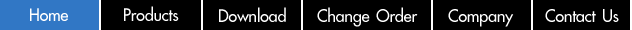
<style>
.page{position:relative;width:632px;height:30px;background:#000000}
.page>*{position:absolute;margin:0}
.t1{font:24px "PSLKittithada";color:#ffffff}
</style>
<div class="page">
<p class="t1" style="left:124px;top:6px;width:55px;height:15px">Products</p>
<p class="t1" style="left:30px;top:8px;width:38px;height:13px">Home</p>
<p class="t1" style="left:219px;top:7px;width:67px;height:15px">Download</p>
<p class="t1" style="left:317px;top:7px;width:101px;height:20px">Change Order</p>
<p class="t1" style="left:448px;top:9px;width:66px;height:18px">Company</p>
<p class="t1" style="left:545px;top:9px;width:74px;height:13px">Contact Us</p>
</div>
